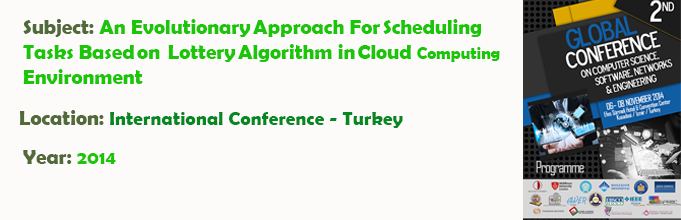
<style>
.page{position:relative;width:681px;height:220px;background:#fdfbf9}
.page>*{position:absolute;margin:0}
.t1{font:20.8px "BerlinSansFBDemi-Bold";color:#1bc609}
.t2{font:20.8px "BerlinSansFBDemi-Bold";color:#526939}
.t3{font:16.7px "BerlinSansFBDemi-Bold";color:#1bc609}
.t4{font:19.4px "BerlinSansFBDemi-Bold";color:#058821}
.t5{font:19.4px "BerlinSansFBDemi-Bold";color:#1bc609}
</style>
<div class="page">
<p class="t1" style="left:23px;top:19px;width:477px;height:65px"><span class="t2">Subject: </span>An Evolutionary Approach  For Scheduling Tasks Based on  Lottery Algorithm in Cloud <span class="t3">Computing</span> Environment</p>
<p class="t4" style="left:20px;top:110px;width:383px;height:18px"><span class="t2">Location: </span>International Conference - Turkey</p>
<p class="t2" style="left:23px;top:150px;width:93px;height:14px">Year: <span class="t5">2014</span></p>
</div>
